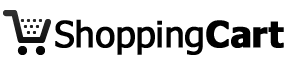
<style>
.page{position:relative;width:290px;height:67px;background:#ffffff}
.page>*{position:absolute;margin:0}
.t1{font:36px "Tahoma";color:#000000;font-weight:bold}
.t2{font:36px "Tahoma-Bold";color:#000000;font-weight:bold}
</style>
<div class="page">
<p class="t1" style="left:55px;top:19px;width:229px;height:36px">Shopping<span class="t2">Cart</span></p>
</div>
